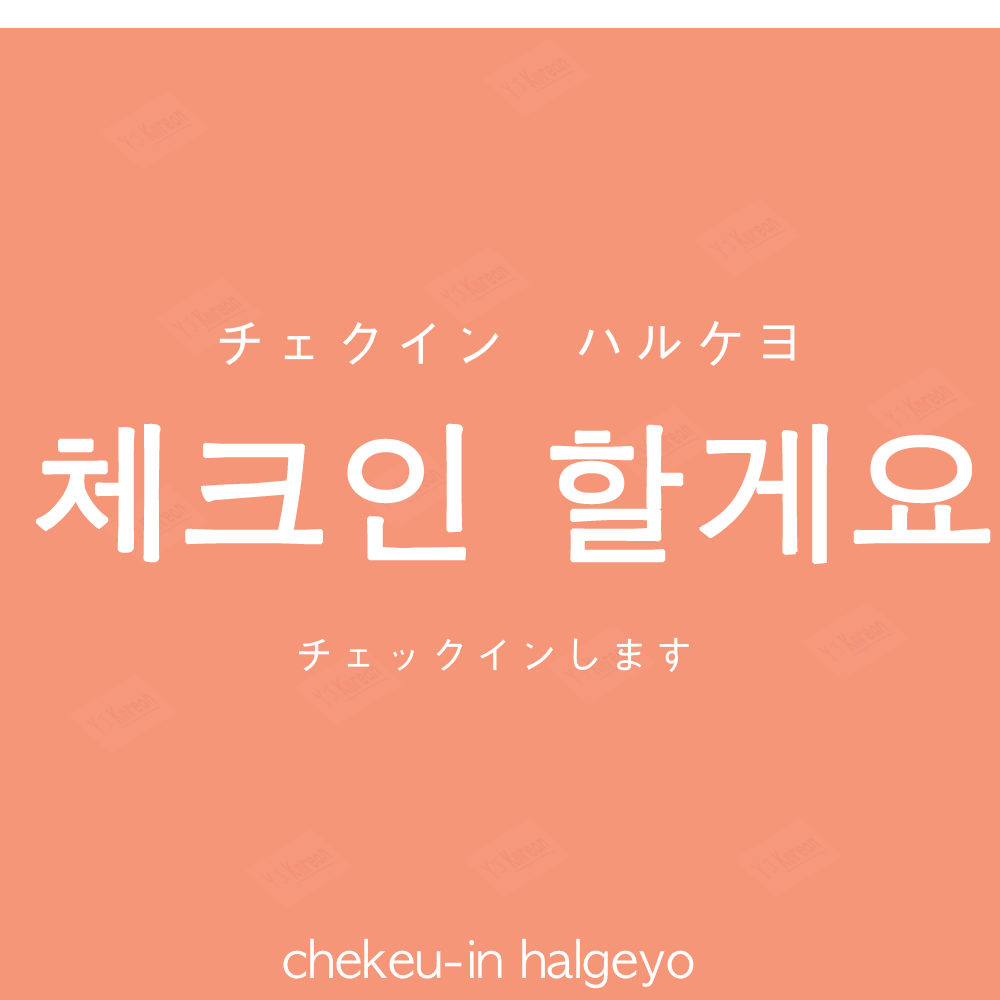
<style>
.page{position:relative;width:1000px;height:1000px;background:#f69679}
.page>*{position:absolute;margin:0}
.t1{font:60px "AppleGothic";color:#ffffff}
.t2{font:150px "AppleGothic";color:#ffffff;font-weight:bold}
.t3{font:45px "AppleGothic";color:#ffffff}
.t4{font:50px "AppleGothic";color:#ffffff}
</style>
<div class="page">
<p class="t1" style="left:219px;top:321px;width:576px;height:45px">チェクイン　ハルケヨ</p>
<p class="t2" style="left:35px;top:423px;width:956px;height:142px">체크인 할게요</p>
<p class="t3" style="left:299px;top:637px;width:390px;height:35px">チェックインします</p>
<p class="t4" style="left:283px;top:938px;width:411px;height:51px">chekeu-in halgeyo</p>
</div>
